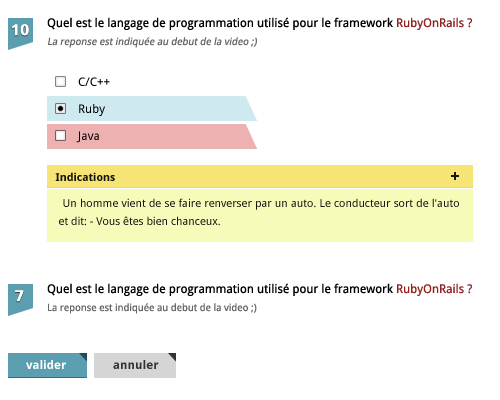
<style>
.page{position:relative;width:500px;height:400px;background:#ffffff}
.page>*{position:absolute;margin:0}
.t1{font:12px "DroidSans";color:#000000}
.t2{font:12px "DroidSans";color:#902220}
.t3{font:16px "DroidSans-Bold";color:#ffffff;font-weight:bold}
.t4{font:10px "DroidSans";color:#666666;font-style:italic}
.t5{font:11px "DroidSans-Bold";color:#000000}
.t6{font:18px "DroidSans-Bold";color:#000000}
.t7{font:11px/18px "DroidSans";color:#000000}
.t8{font:10px "DroidSans";color:#666666}
.t9{font:12px "DroidSans-Bold";color:#ffffff}
.t10{font:12px "DroidSans-Bold";color:#333333}
</style>
<div class="page">
<p class="t1" style="left:47px;top:17px;width:425px;height:13px">Quel est le langage de programmation utilisé pour le framework <span class="t2">RubyOnRails ?</span></p>
<p class="t3" style="left:11px;top:24px;width:18px;height:13px">10</p>
<p class="t4" style="left:48px;top:37px;width:209px;height:11px">La reponse est indiquée au debut de la video ;)</p>
<p class="t1" style="left:78px;top:77px;width:32px;height:9px">C/C++</p>
<p class="t1" style="left:79px;top:104px;width:26px;height:12px">Ruby</p>
<p class="t1" style="left:76px;top:131px;width:23px;height:12px">Java</p>
<p class="t5" style="left:55px;top:172px;width:60px;height:9px;opacity:0.91">Indications</p>
<p class="t6" style="left:451px;top:172px;width:8px;height:8px;opacity:0.91">+</p>
<p class="t7" style="left:59px;top:198px;width:400px;height:28px;text-align:justify;opacity:0.91">Un homme vient de se faire renverser par un auto. Le conducteur sort de l'auto et dit: - Vous êtes bien chanceux.</p>
<p class="t3" style="left:15px;top:290px;width:9px;height:13px">7</p>
<p class="t1" style="left:47px;top:283px;width:425px;height:13px">Quel est le langage de programmation utilisé pour le framework <span class="t2">RubyOnRails ?</span></p>
<p class="t8" style="left:48px;top:303px;width:209px;height:11px">La reponse est indiquée au debut de la video ;)</p>
<p class="t9" style="left:26px;top:360px;width:40px;height:9px">valider</p>
<p class="t10" style="left:113px;top:360px;width:46px;height:9px">annuler</p>
</div>
